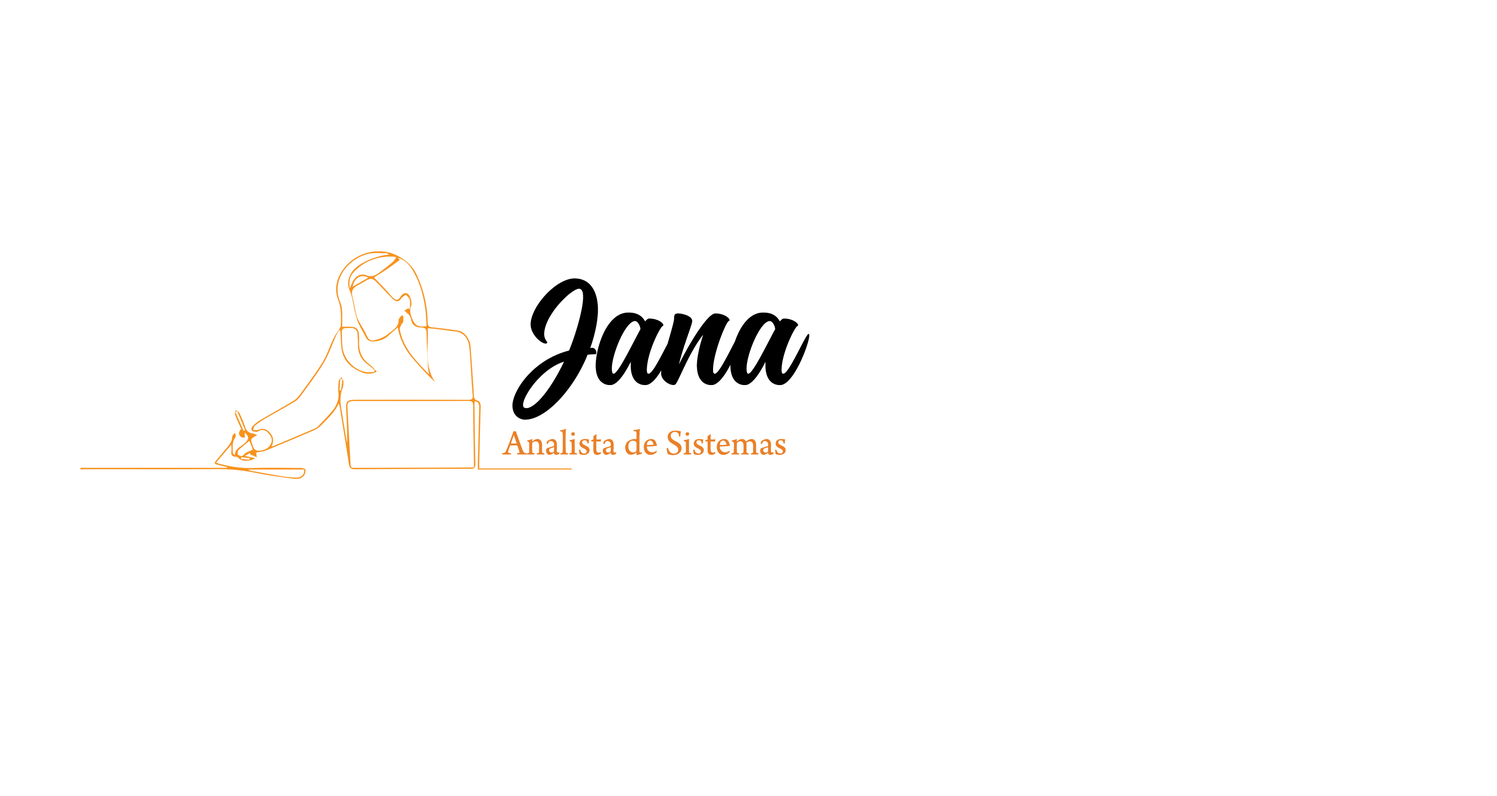
<style>
.page{position:relative;width:1497px;height:796px;background:#ffffff}
.page>*{position:absolute;margin:0}
.t1{font:149.7px "Montana";color:#000000}
.t2{font:37.4px "ArnoPro-Regular";color:#ea8028}
</style>
<div class="page">
<p class="t1" style="left:513px;top:278px;width:296px;height:142px">Jana</p>
<p class="t2" style="left:502px;top:429px;width:284px;height:27px">Analista de Sistemas</p>
</div>
